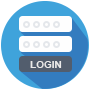
<style>
.page{position:relative;width:90px;height:90px;background:#ffffff}
.page>*{position:absolute;margin:0}
.t1{font:10px "Arial-BoldMT";color:#e9e9e9}
</style>
<div class="page">
<p class="t1" style="left:30px;top:61px;width:32px;height:7px">LOGIN</p>
</div>
